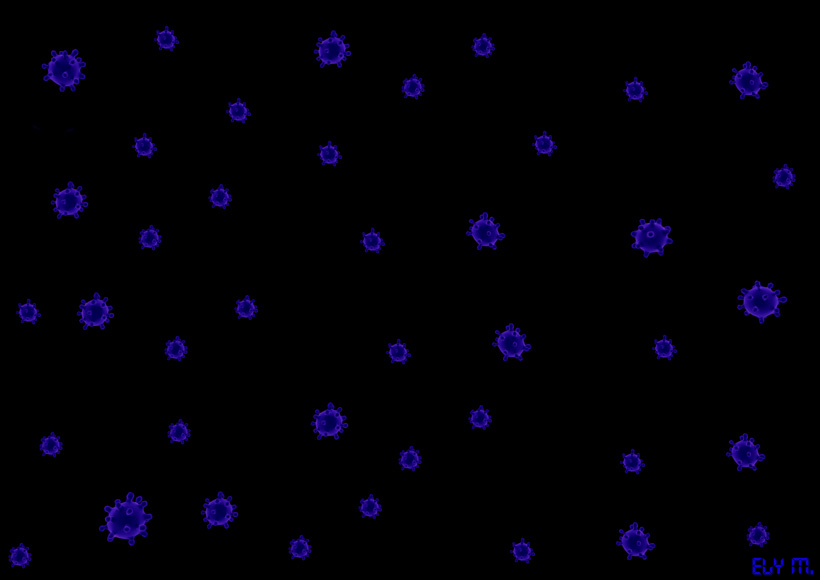
<style>
.page{position:relative;width:820px;height:580px;background:#000000}
.page>*{position:absolute;margin:0}
.t1{font:24px "Transistor";color:#0f00d3}
</style>
<div class="page">
<p class="t1" style="left:752px;top:557px;width:62px;height:18px">ELY M.</p>
</div>
